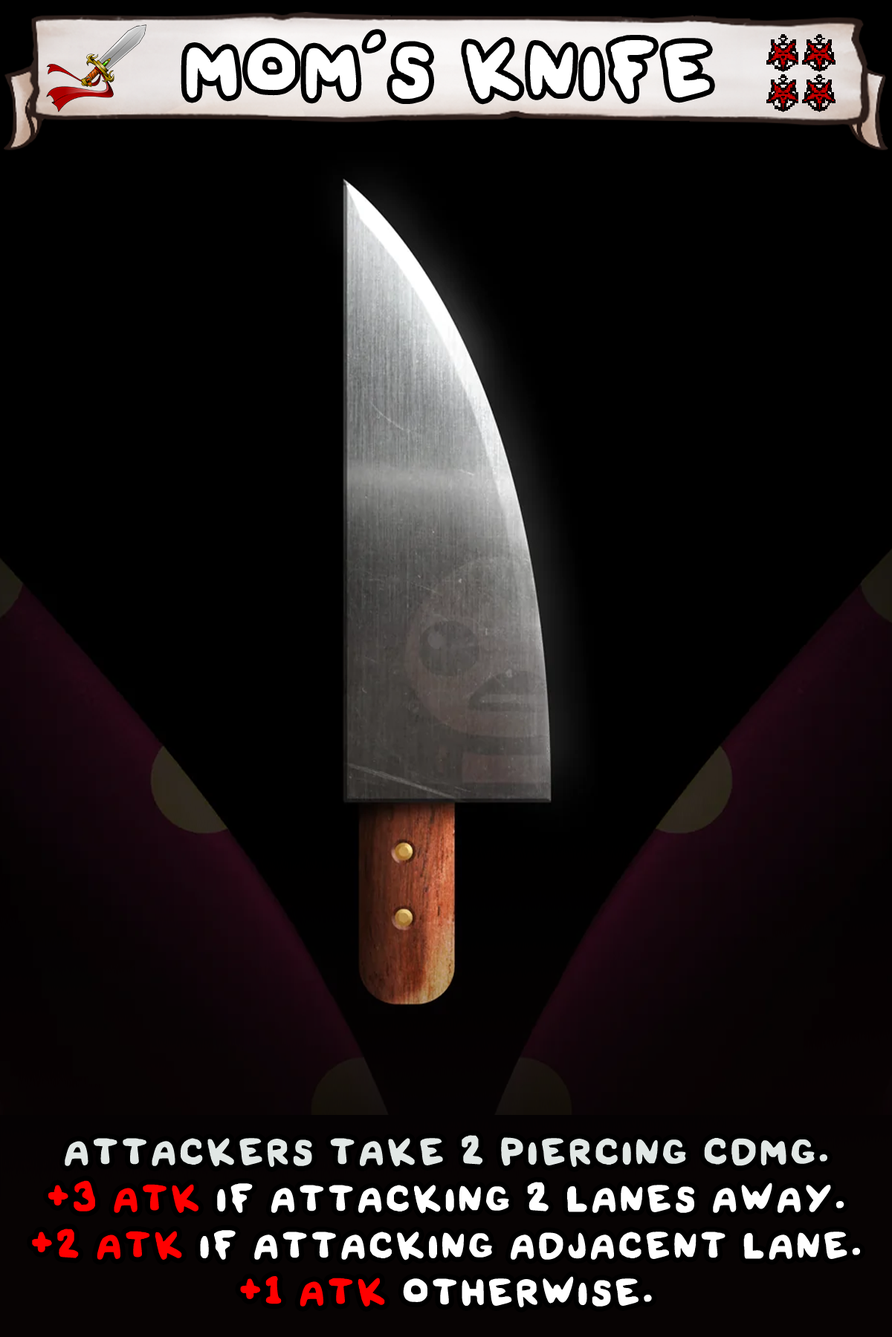
<style>
.page{position:relative;width:892px;height:1337px;background:#000000}
.page>*{position:absolute;margin:0}
.t1{font:182.8px "Font_soulsV2_Body-Regular";color:#ffffff}
.t2{font:91.4px/46.8px "Font_soulsV2_Body-Regular";color:#f0f3f2}
.t3{font:91.4px/46.8px "Font_soulsV2_Body-Regular";color:#ff0000}
.t4{font:91.4px/46.8px "Font_soulsV2_Body-Regular";color:#ffffff}
</style>
<div class="page">
<p class="t1" style="left:186px;top:34px;width:524px;height:66px">Mom's Knife</p>
<p class="t2" style="left:32px;top:1135px;width:828px;height:173px;text-align:center">Attackers take 2 piercing CDMG.<br><span class="t3">+3 ATK</span><span class="t4"> if attacking 2 lanes away.<br></span><span class="t3">+2 ATK</span><span class="t4"> if attacking adjacent lane.<br></span><span class="t3">+1 ATK </span><span class="t4">otherwise.</span></p>
</div>
